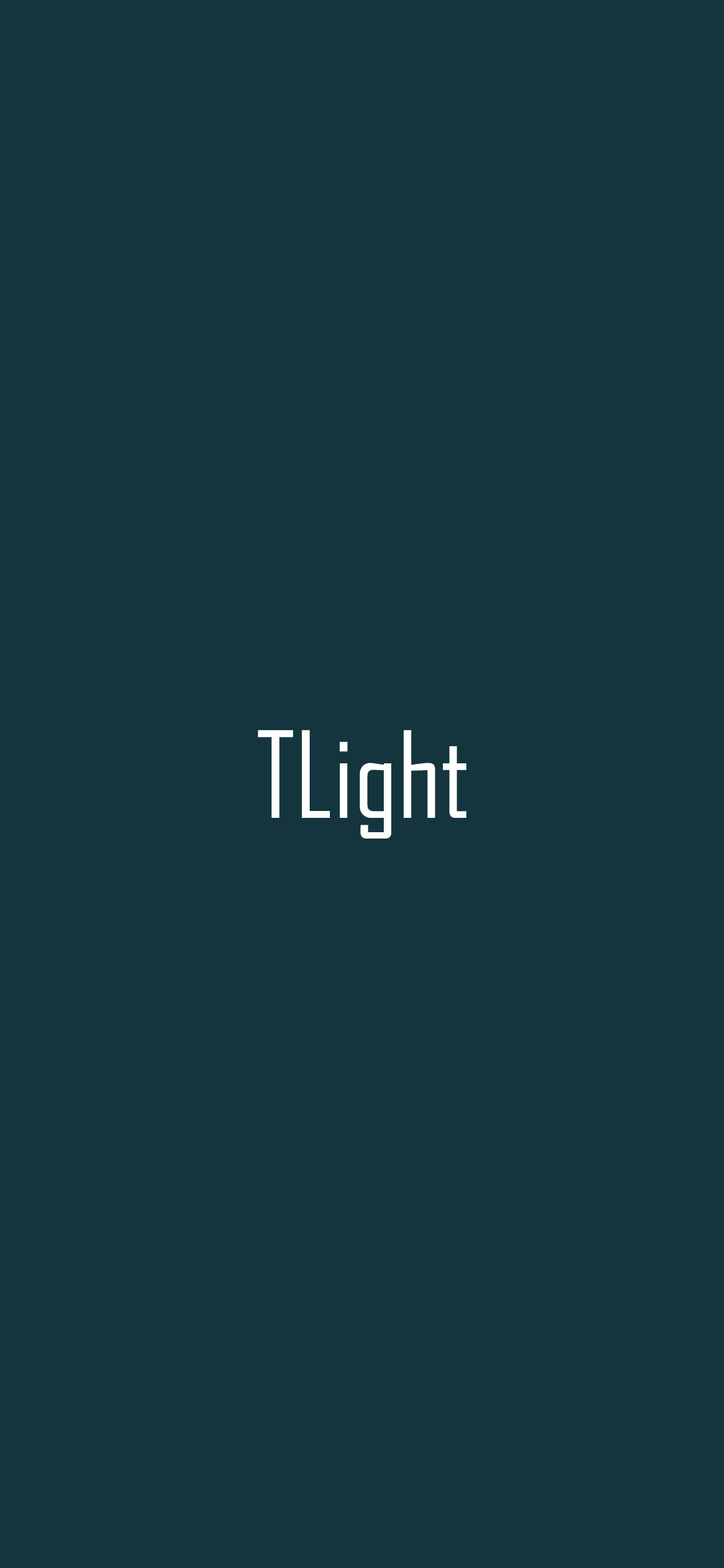
<style>
.page{position:relative;width:724px;height:1568px;background:#15353e}
.page>*{position:absolute;margin:0}
.t1{font:114.8px "AgencyFB-Reg";color:#ffffff}
</style>
<div class="page">
<p class="t1" style="left:258px;top:730px;width:209px;height:109px">TLight</p>
</div>
